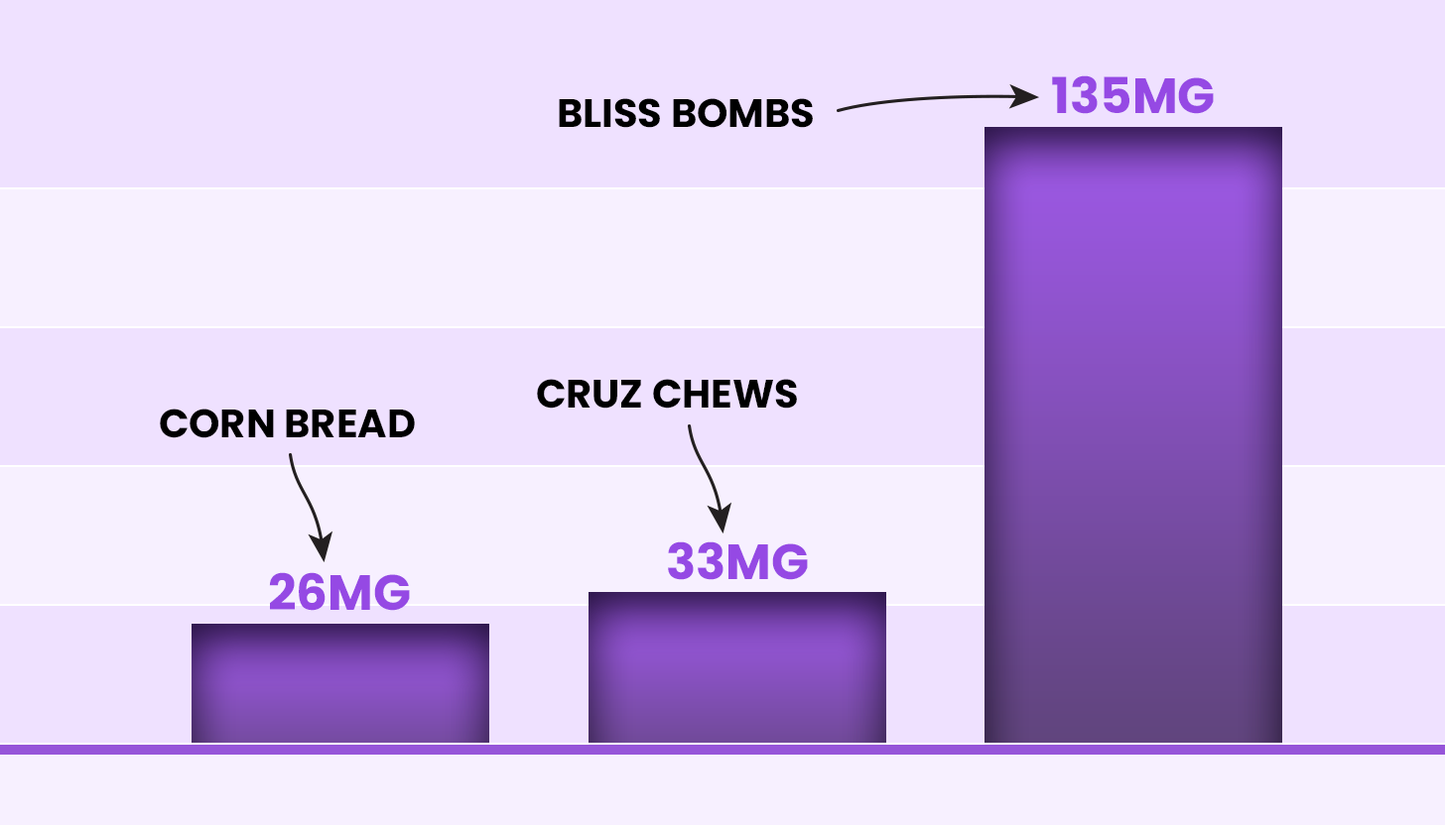
<style>
.page{position:relative;width:1445px;height:825px;background:#efe1ff}
.page>*{position:absolute;margin:0}
.t1{font:49.6px "Poppins-Bold";color:#9549e4;text-transform:uppercase}
.t2{font:39.7px "Poppins-Bold";color:#000000;text-transform:uppercase}
</style>
<div class="page">
<p class="t1" style="left:1052px;top:75px;width:161px;height:39px">135mg</p>
<p class="t2" style="left:559px;top:98px;width:254px;height:30px">BLISS BOMBS</p>
<p class="t2" style="left:537px;top:379px;width:260px;height:30px">Cruz Chews</p>
<p class="t2" style="left:160px;top:409px;width:255px;height:30px">Corn Bread</p>
<p class="t1" style="left:668px;top:542px;width:140px;height:38px">33mg</p>
<p class="t1" style="left:269px;top:572px;width:141px;height:39px">26mg</p>
</div>
